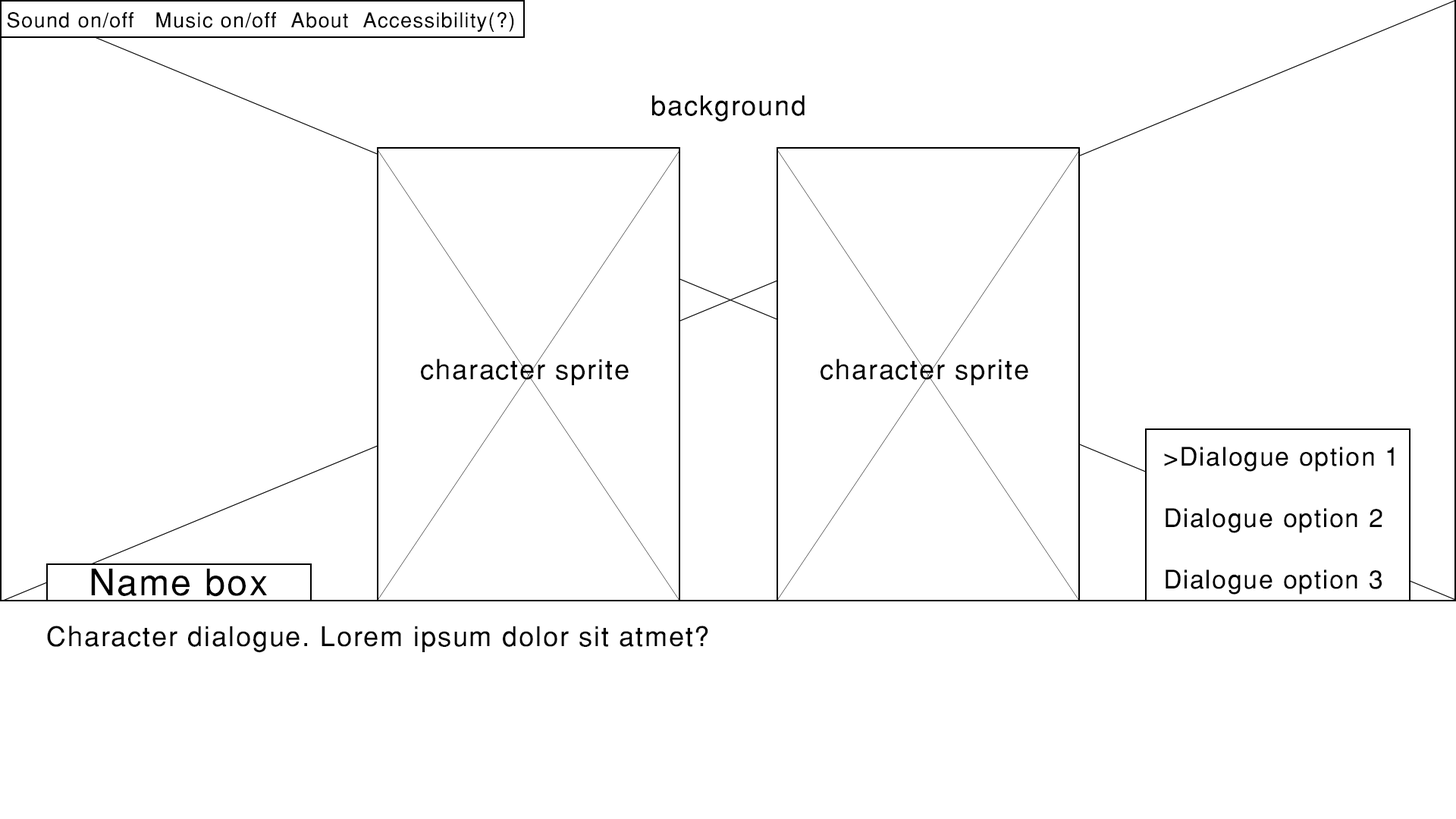
<style>
.page{position:relative;width:1456px;height:819px;background:#ffffff}
.page>*{position:absolute;margin:0}
.t1{font:20.5px "Helvetica-Normal";letter-spacing:0.05em;color:#000000}
.t2{font:27.3px "Helvetica-Normal";letter-spacing:0.05em;color:#000000}
.t3{font:25.6px "Helvetica-Normal";letter-spacing:0.05em;color:#000000}
.t4{font:36.4px "Helvetica-Normal";letter-spacing:0.05em;color:#000000}
</style>
<div class="page">
<p class="t1" style="left:7px;top:12px;width:507px;height:20px">Sound on/off   Music on/off  About  Accessibility(?)</p>
<p class="t2" style="left:652px;top:95px;width:153px;height:27px">background</p>
<p class="t2" style="left:421px;top:359px;width:208px;height:26px">character sprite</p>
<p class="t2" style="left:821px;top:359px;width:207px;height:26px">character sprite</p>
<p class="t3" style="left:1164px;top:447px;width:230px;height:148px">&gt;Dialogue option 1<br><br>Dialogue option 2<br><br>Dialogue option 3</p>
<p class="t4" style="left:91px;top:568px;width:176px;height:29px">Name box</p>
<p class="t2" style="left:47px;top:626px;width:661px;height:27px">Character dialogue. Lorem ipsum dolor sit atmet?</p>
</div>
